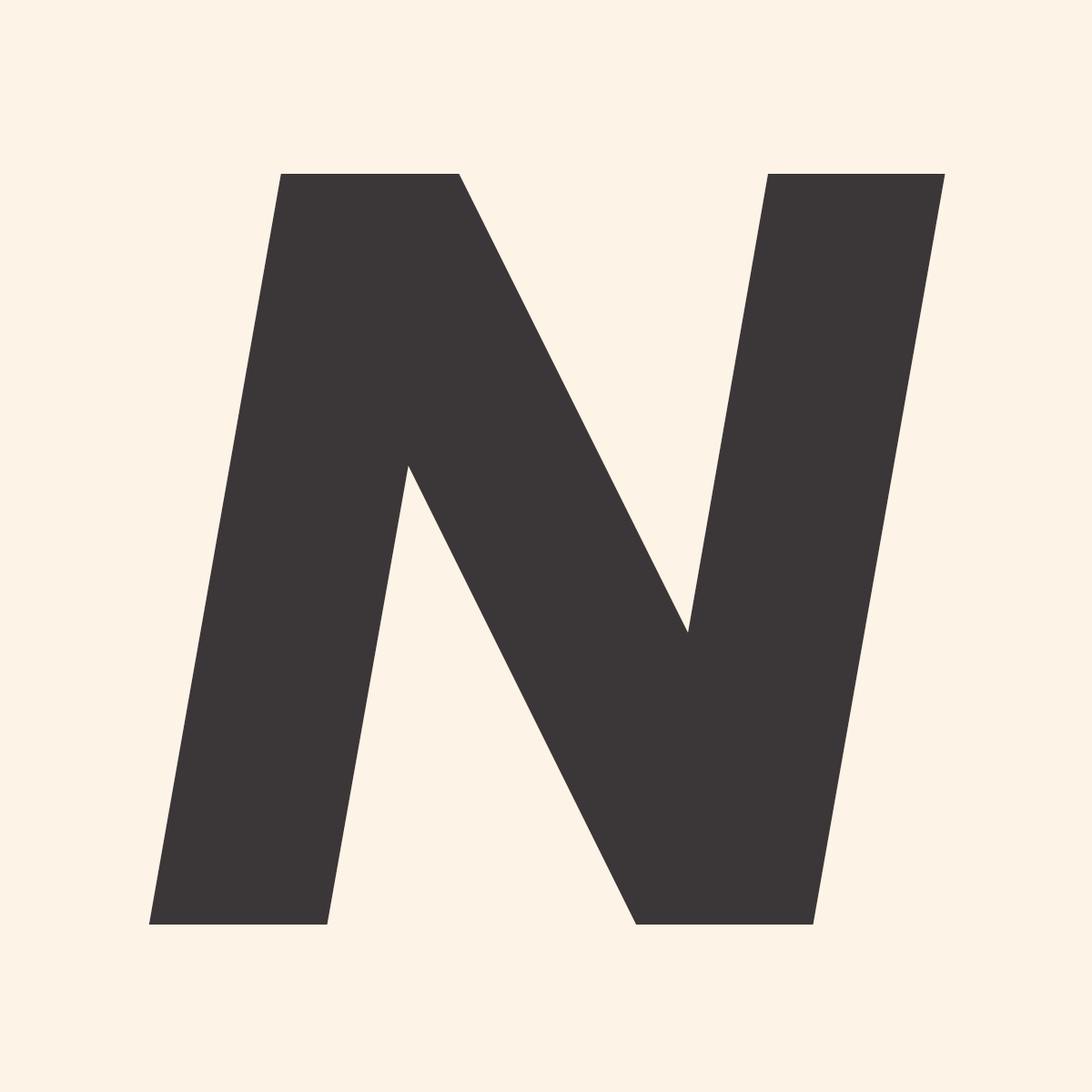
<style>
.page{position:relative;width:1092px;height:1092px;background:#fdf3e7}
.page>*{position:absolute;margin:0}
.t1{font:1127.2px "Seravek-BoldItalic";color:#3b3738}
</style>
<div class="page">
<p class="t1" style="left:148px;top:174px;width:797px;height:751px">N</p>
</div>
